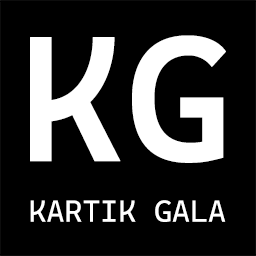
<style>
.page{position:relative;width:256px;height:256px;background:#000000}
.page>*{position:absolute;margin:0}
.t1{font:178.2px "CascadiaCode-SemiBold";color:#ffffff;font-weight:bold}
.t2{font:30.6px "CascadiaCode-Regular";color:#ffffff;font-weight:bold}
</style>
<div class="page">
<p class="t1" style="left:30px;top:35px;width:196px;height:128px">KG</p>
<p class="t2" style="left:30px;top:200px;width:196px;height:22px">KARTIK GALA</p>
</div>
